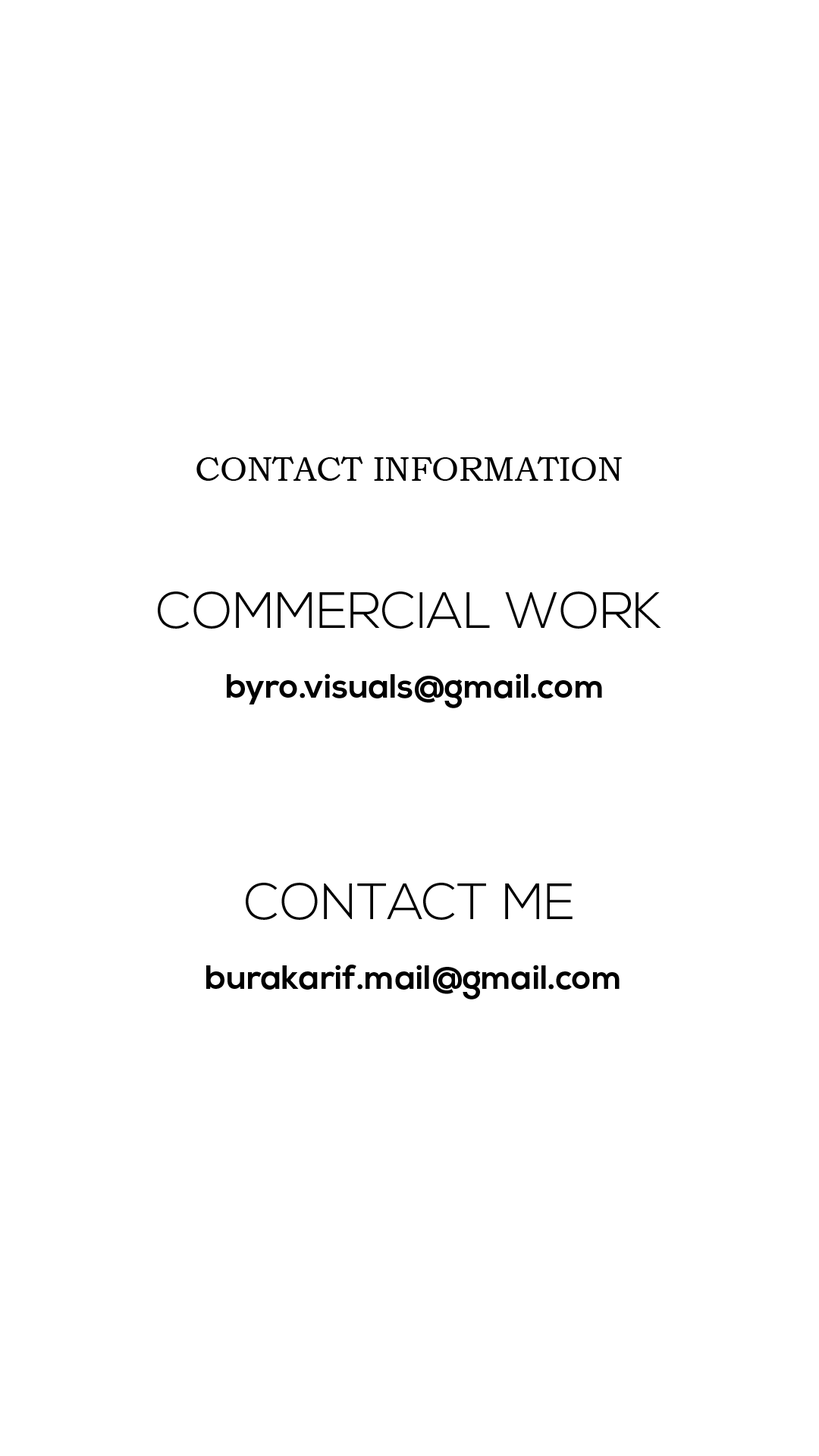
<style>
.page{position:relative;width:819px;height:1456px;background:#ffffff}
.page>*{position:absolute;margin:0}
.t1{font:34px "BookmanOldStyle";color:#000000}
.t2{font:50.9px "NexaLight";color:#000000}
.t3{font:34px "NexaBold";color:#000000}
</style>
<div class="page">
<p class="t1" style="left:196px;top:457px;width:426px;height:24px">CONTACT INFORMATION</p>
<p class="t2" style="left:158px;top:591px;width:503px;height:38px">COMMERCIAL WORK</p>
<p class="t3" style="left:227px;top:673px;width:375px;height:35px">byro.visuals@gmail.com</p>
<p class="t2" style="left:246px;top:883px;width:327px;height:37px">CONTACT ME</p>
<p class="t3" style="left:206px;top:965px;width:414px;height:34px">burakarif.mail@gmail.com</p>
</div>
